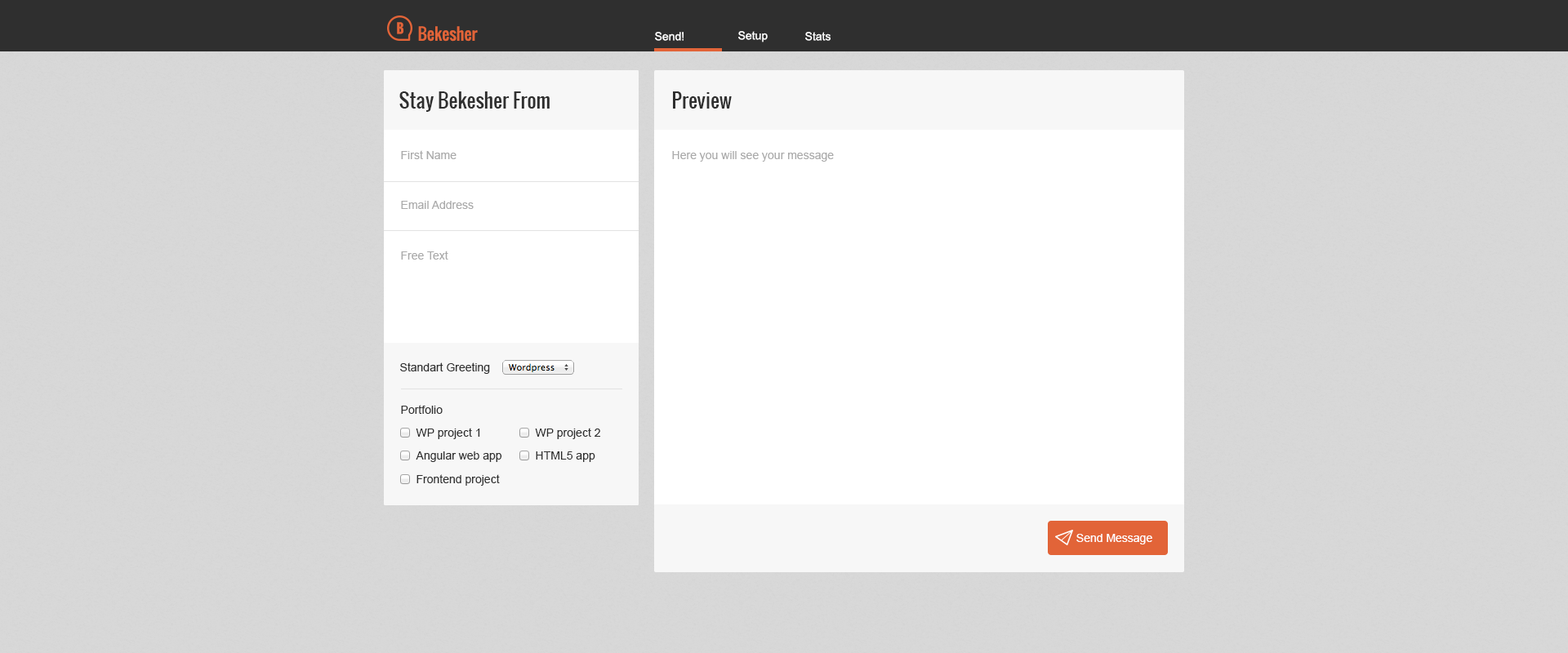
<style>
.page{position:relative;width:1568px;height:653px;background:#d7d7d7}
.page>*{position:absolute;margin:0}
.t1{font:13.1px "Oswald-Bold";color:#e26438}
.t2{font:16.3px "Oswald-Regular";color:#e26438}
.t3{font:11.4px "ArialMT";color:#ffffff}
.t4{font:19.6px "Oswald-Regular";color:#2f2f2f}
.t5{font:11.4px "ArialMT";color:#aaaaaa}
.t6{font:11.4px "ArialMT";color:#2f2f2f}
</style>
<div class="page">
<p class="t1" style="left:397px;top:22px;width:6px;height:12px">B</p>
<p class="t2" style="left:418px;top:26px;width:60px;height:16px">Bekesher</p>
<p class="t3" style="left:655px;top:32px;width:29px;height:9px">Send!</p>
<p class="t3" style="left:738px;top:31px;width:30px;height:11px">Setup</p>
<p class="t3" style="left:805px;top:32px;width:26px;height:9px">Stats</p>
<p class="t4" style="left:399px;top:91px;width:151px;height:21px">Stay Bekesher From</p>
<p class="t4" style="left:673px;top:91px;width:59px;height:18px">Preview</p>
<p class="t5" style="left:401px;top:150px;width:56px;height:9px">First Name</p>
<p class="t5" style="left:672px;top:151px;width:162px;height:11px">Here you will see your message</p>
<p class="t5" style="left:401px;top:201px;width:73px;height:8px">Email Address</p>
<p class="t5" style="left:401px;top:251px;width:47px;height:9px">Free Text</p>
<p class="t6" style="left:400px;top:363px;width:90px;height:11px">Standart Greeting</p>
<p class="t6" style="left:401px;top:405px;width:42px;height:9px">Portfolio</p>
<p class="t6" style="left:416px;top:428px;width:64px;height:11px">WP project 1</p>
<p class="t6" style="left:535px;top:428px;width:65px;height:11px">WP project 2</p>
<p class="t6" style="left:416px;top:452px;width:86px;height:10px">Angular web app</p>
<p class="t6" style="left:536px;top:452px;width:59px;height:10px">HTML5 app</p>
<p class="t6" style="left:416px;top:474px;width:84px;height:12px">Frontend project</p>
<p class="t3" style="left:1076px;top:534px;width:76px;height:11px">Send Message</p>
</div>
